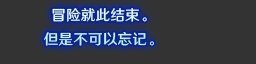
<style>
.page{position:relative;width:256px;height:64px;background:#333333}
.page>*{position:absolute;margin:0}
.t1{font:14.7px/24px "HYWenHei-FEW";letter-spacing:0.005em}
</style>
<div class="page">
<p class="t1" style="left:44px;top:8px;width:110px;height:38px;text-align:center">冒险就此结束。<br>但是不可以忘记。</p>
</div>
